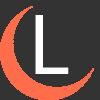
<style>
.page{position:relative;width:100px;height:100px;background:#333333}
.page>*{position:absolute;margin:0}
.t1{font:87.5px "MyriadPro-Regular";color:#ffffff}
</style>
<div class="page">
<p class="t1" style="left:35px;top:15px;width:34px;height:59px">L</p>
</div>
